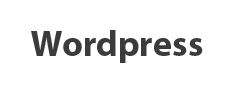
<style>
.page{position:relative;width:250px;height:98px;background:#ffffff}
.page>*{position:absolute;margin:0}
.t1{font:36px "MyriadPro-Bold";color:#3b3b3b}
</style>
<div class="page">
<p class="t1" style="left:31px;top:30px;width:172px;height:33px">Wordpress</p>
</div>
